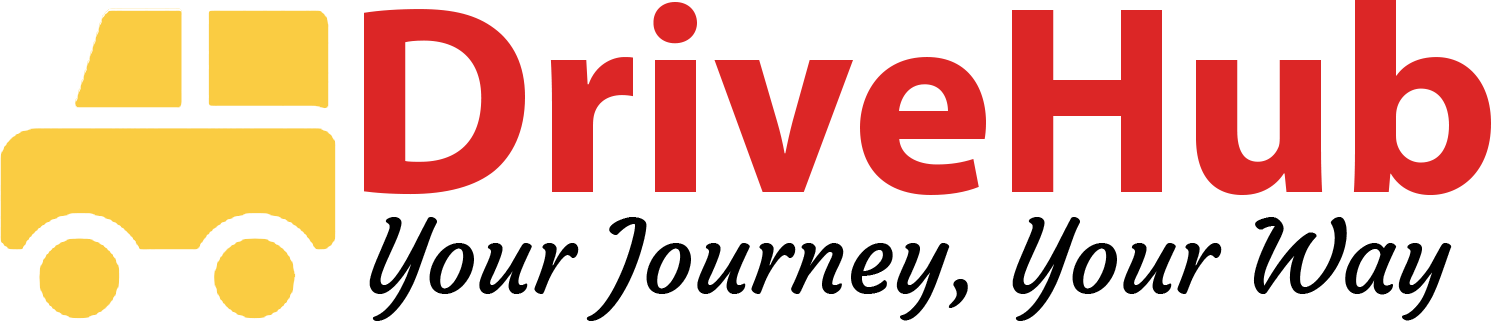
<style>
.page{position:relative;width:1491px;height:321px;background:#ffffff}
.page>*{position:absolute;margin:0}
.t1{font:270.3px "MyriadPro-Bold";color:#dc2626}
.t2{font:100px "Courgette-Regular";color:#000000}
</style>
<div class="page">
<p class="t1" style="left:364px;top:0px;width:1127px;height:196px">DriveHub</p>
<p class="t2" style="left:369px;top:217px;width:1083px;height:104px">Your Journey, Your Way</p>
</div>
